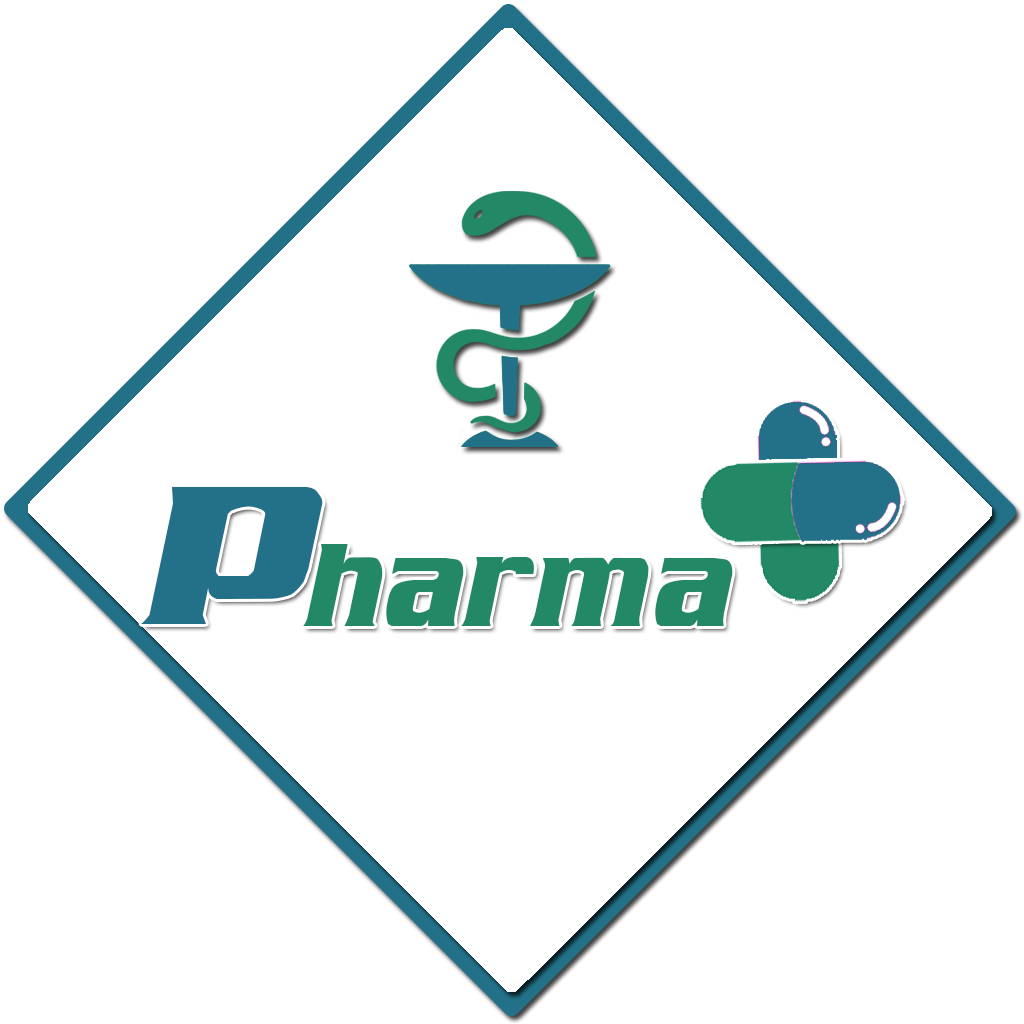
<style>
.page{position:relative;width:1024px;height:1024px;background:#ffffff}
.page>*{position:absolute;margin:0}
.t1{font:200.9px "AirMillhouseItalic";color:#228866}
.t2{font:200.9px "AirMillhouseItalic";color:#227188}
</style>
<div class="page">
<p class="t1" style="left:141px;top:486px;width:592px;height:140px"><span class="t2">P</span>harma</p>
</div>
